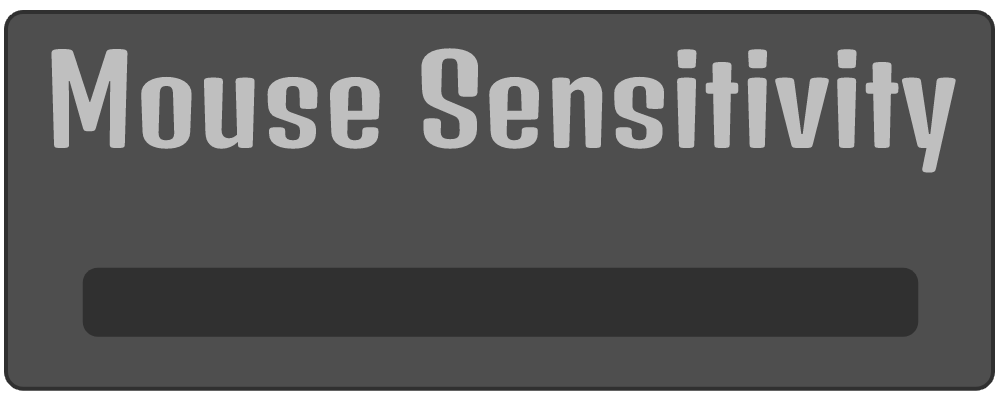
<style>
.page{position:relative;width:1000px;height:400px;background:#4e4e4e}
.page>*{position:absolute;margin:0}
.t1{font:120px "DenkOne-Regular";color:#bfbfbf}
</style>
<div class="page">
<p class="t1" style="left:51px;top:48px;width:905px;height:125px">Mouse Sensitivity</p>
</div>
